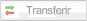
<style>
.page{position:relative;width:87px;height:21px;background:#ffffff}
.page>*{position:absolute;margin:0}
.t1{font:11px "ArialUnicodeMS";letter-spacing:-0.05em;color:#a3a3a3;font-weight:bold}
</style>
<div class="page">
<p class="t1" style="left:26px;top:6px;width:46px;height:9px">Transferir</p>
</div>
